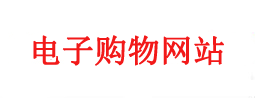
<style>
.page{position:relative;width:255px;height:98px;background:#ffffff}
.page>*{position:absolute;margin:0}
.t1{font:32px "SimSun";color:#f21919;font-weight:bold}
</style>
<div class="page">
<p class="t1" style="left:33px;top:35px;width:191px;height:31px">电子购物网站</p>
</div>
